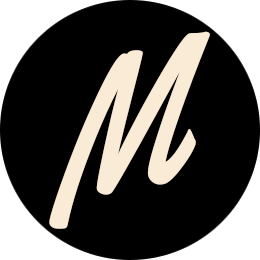
<style>
.page{position:relative;width:260px;height:260px;background:#000000}
.page>*{position:absolute;margin:0}
.t1{font:187.5px "Yellowtail-Regular";color:#faebd7}
</style>
<div class="page">
<p class="t1" style="left:49px;top:31px;width:161px;height:198px;rotate:-15deg">M</p>
</div>
